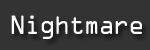
<style>
.page{position:relative;width:150px;height:50px;background:#333333}
.page>*{position:absolute;margin:0}
.t1{font:23.9px "OCRAStd";letter-spacing:-0.1em;color:#ffffff}
</style>
<div class="page">
<p class="t1" style="left:11px;top:15px;width:131px;height:24px">Nightmare</p>
</div>
